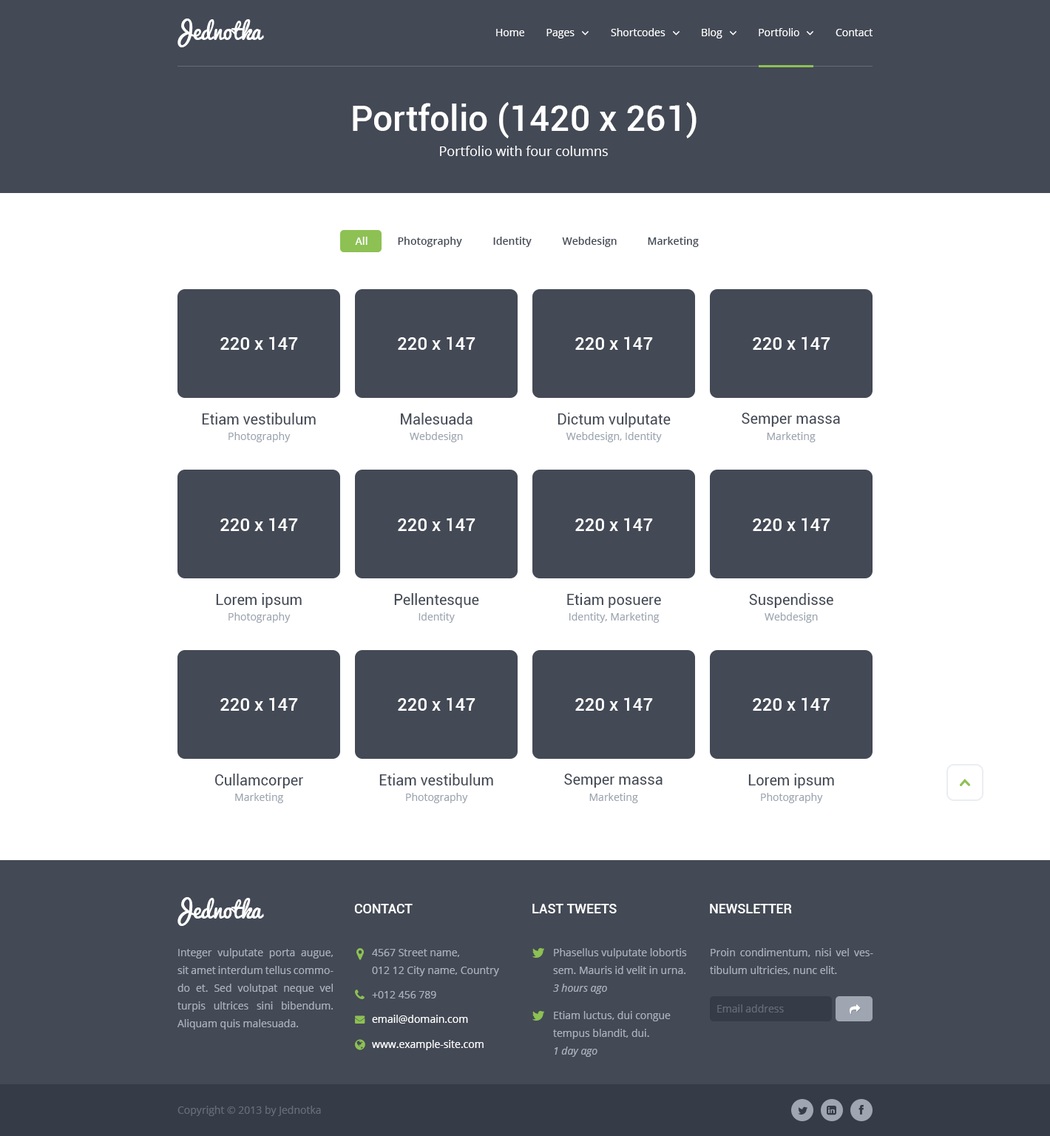
<style>
.page{position:relative;width:1050px;height:1136px;background:#434955}
.page>*{position:absolute;margin:0}
.t1{font:22.2px "Pacifico";color:#ffffff}
.t2{font:10.4px "OpenSans";color:#ffffff}
.t3{font:35.5px "Roboto-Medium";color:#ffffff}
.t4{font:13.3px "OpenSans";color:#ffffff}
.t5{font:10.4px "OpenSans-Semibold";color:#ffffff}
.t6{font:10.4px "OpenSans-Semibold";color:#434955}
.t7{font:17.7px "Roboto-Medium";color:#ffffff}
.t8{font:14.8px "Roboto-Regular";color:#434955}
.t9{font:10.4px "OpenSans";color:#9ca4af}
.t10{font:13.3px "Roboto-Medium";color:#ffffff;text-transform:uppercase}
.t11{font:10.4px/17.7px "OpenSans";color:#aab2bd}
.t12{font:10.4px "OpenSans-Italic";color:#aab2bd}
.t13{font:10.4px "OpenSans";color:#aab2bd}
.t14{font:10.4px "OpenSans";color:#656d78}
</style>
<div class="page">
<p class="t1" style="left:177px;top:18px;width:87px;height:29px">Jednotka</p>
<p class="t2" style="left:496px;top:29px;width:28px;height:7px">Home</p>
<p class="t2" style="left:546px;top:29px;width:29px;height:9px">Pages</p>
<p class="t2" style="left:611px;top:28px;width:54px;height:8px">Shortcodes</p>
<p class="t2" style="left:702px;top:28px;width:20px;height:10px">Blog</p>
<p class="t2" style="left:759px;top:28px;width:40px;height:8px">Portfolio</p>
<p class="t2" style="left:836px;top:29px;width:36px;height:7px">Contact</p>
<p class="t3" style="left:353px;top:102px;width:344px;height:36px">Portfolio (1420 x 261)</p>
<p class="t4" style="left:440px;top:146px;width:168px;height:10px">Portfolio with four columns</p>
<p class="t5" style="left:355px;top:237px;width:12px;height:8px">All</p>
<p class="t6" style="left:398px;top:237px;width:64px;height:10px">Photography</p>
<p class="t6" style="left:493px;top:237px;width:39px;height:10px">Identity</p>
<p class="t6" style="left:562px;top:237px;width:55px;height:10px">Webdesign</p>
<p class="t6" style="left:648px;top:237px;width:51px;height:10px">Marketing</p>
<p class="t7" style="left:220px;top:336px;width:78px;height:14px">220 x 147</p>
<p class="t7" style="left:398px;top:336px;width:77px;height:14px">220 x 147</p>
<p class="t7" style="left:575px;top:336px;width:78px;height:14px">220 x 147</p>
<p class="t7" style="left:753px;top:336px;width:77px;height:14px">220 x 147</p>
<p class="t8" style="left:202px;top:413px;width:114px;height:11px">Etiam vestibulum</p>
<p class="t8" style="left:401px;top:413px;width:71px;height:11px">Malesuada</p>
<p class="t8" style="left:558px;top:413px;width:113px;height:14px">Dictum vulputate</p>
<p class="t8" style="left:742px;top:413px;width:98px;height:14px">Semper massa</p>
<p class="t9" style="left:228px;top:432px;width:63px;height:10px">Photography</p>
<p class="t9" style="left:410px;top:432px;width:53px;height:10px">Webdesign</p>
<p class="t9" style="left:566px;top:432px;width:96px;height:10px">Webdesign, Identity</p>
<p class="t9" style="left:767px;top:432px;width:49px;height:10px">Marketing</p>
<p class="t7" style="left:220px;top:518px;width:78px;height:13px">220 x 147</p>
<p class="t7" style="left:398px;top:518px;width:77px;height:13px">220 x 147</p>
<p class="t7" style="left:575px;top:518px;width:78px;height:13px">220 x 147</p>
<p class="t7" style="left:753px;top:518px;width:77px;height:13px">220 x 147</p>
<p class="t8" style="left:216px;top:593px;width:86px;height:15px">Lorem ipsum</p>
<p class="t8" style="left:394px;top:593px;width:85px;height:15px">Pellentesque</p>
<p class="t8" style="left:567px;top:593px;width:94px;height:15px">Etiam posuere</p>
<p class="t8" style="left:749px;top:593px;width:84px;height:15px">Suspendisse</p>
<p class="t9" style="left:228px;top:612px;width:63px;height:11px">Photography</p>
<p class="t9" style="left:418px;top:612px;width:37px;height:11px">Identity</p>
<p class="t9" style="left:569px;top:612px;width:91px;height:11px">Identity, Marketing</p>
<p class="t9" style="left:765px;top:612px;width:53px;height:11px">Webdesign</p>
<p class="t7" style="left:220px;top:697px;width:78px;height:14px">220 x 147</p>
<p class="t7" style="left:398px;top:697px;width:77px;height:14px">220 x 147</p>
<p class="t7" style="left:575px;top:697px;width:78px;height:14px">220 x 147</p>
<p class="t7" style="left:753px;top:697px;width:77px;height:14px">220 x 147</p>
<p class="t8" style="left:215px;top:773px;width:88px;height:15px">Cullamcorper</p>
<p class="t8" style="left:379px;top:773px;width:114px;height:12px">Etiam vestibulum</p>
<p class="t8" style="left:564px;top:773px;width:98px;height:14px">Semper massa</p>
<p class="t8" style="left:748px;top:773px;width:86px;height:15px">Lorem ipsum</p>
<p class="t9" style="left:235px;top:793px;width:48px;height:10px">Marketing</p>
<p class="t9" style="left:406px;top:793px;width:62px;height:10px">Photography</p>
<p class="t9" style="left:589px;top:793px;width:49px;height:10px">Marketing</p>
<p class="t9" style="left:761px;top:793px;width:62px;height:10px">Photography</p>
<p class="t1" style="left:177px;top:897px;width:87px;height:29px">Jednotka</p>
<p class="t10" style="left:354px;top:904px;width:59px;height:9px">CONTACT</p>
<p class="t10" style="left:532px;top:904px;width:85px;height:9px">Last tweets</p>
<p class="t10" style="left:710px;top:904px;width:82px;height:9px">Newsletter</p>
<p class="t11" style="left:177px;top:948px;width:156px;height:81px;text-align:justify">Integer vulputate porta augue, sit amet interdum tellus commodo et. Sed volutpat neque vel turpis ultrices sini bibendum. Aliquam quis malesuada.</p>
<p class="t11" style="left:372px;top:949px;width:127px;height:27px">4567 Street name, <br>012 12 City name, Country</p>
<p class="t11" style="left:553px;top:948px;width:134px;height:26px">Phasellus vulputate lobortis sem. Mauris id velit in urna.</p>
<p class="t11" style="left:710px;top:948px;width:163px;height:27px;text-align:justify">Proin condimentum, nisi vel vestibulum ultricies, nunc elit.</p>
<p class="t12" style="left:553px;top:983px;width:54px;height:11px">3 hours ago</p>
<p class="t13" style="left:372px;top:991px;width:64px;height:7px">+012 456 789</p>
<p class="t11" style="left:553px;top:1011px;width:118px;height:28px">Etiam luctus, dui congue tempus blandit, dui.</p>
<p class="t14" style="left:717px;top:1004px;width:67px;height:8px">Email address</p>
<p class="t2" style="left:372px;top:1014px;width:96px;height:9px">email@domain.com</p>
<p class="t2" style="left:372px;top:1040px;width:112px;height:10px">www.example-site.com</p>
<p class="t12" style="left:555px;top:1046px;width:42px;height:11px">1 day ago</p>
<p class="t14" style="left:177px;top:1105px;width:144px;height:11px">Copyright © 2013 by Jednotka</p>
</div>
